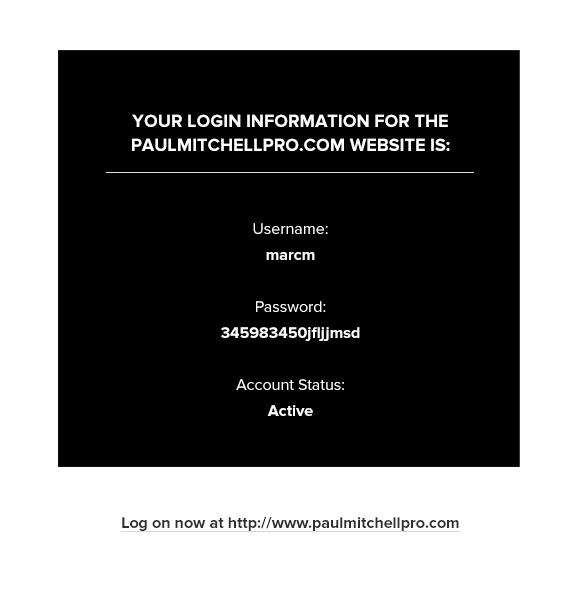
<style>
.page{position:relative;width:580px;height:606px;background:#000000}
.page>*{position:absolute;margin:0}
.t1{font:18px/24px "ProximaNova-Bold";color:#ffffff;text-transform:uppercase}
.t2{font:16px/26px "ProximaNova-Bold";color:#fefefe}
.t3{font:16px/26px "ProximaNova-Regular";color:#fefefe}
.t4{font:16px "ProximaNova-Bold";color:#2e2e2e;text-decoration:underline}
</style>
<div class="page">
<p class="t1" style="left:132px;top:114px;width:318px;height:37px;text-align:center">your login information for the paulmitchellpro.com website is:</p>
<p class="t2" style="left:221px;top:223px;width:139px;height:193px;text-align:center"><span class="t3">Username:<br></span>marcm<br><span class="t3"><br>Password:<br></span>345983450jfljjmsd<br><br><span class="t3">Account Status:<br></span>Active</p>
<p class="t4" style="left:121px;top:517px;width:339px;height:15px">Log on now at http://www.paulmitchellpro.com</p>
</div>
